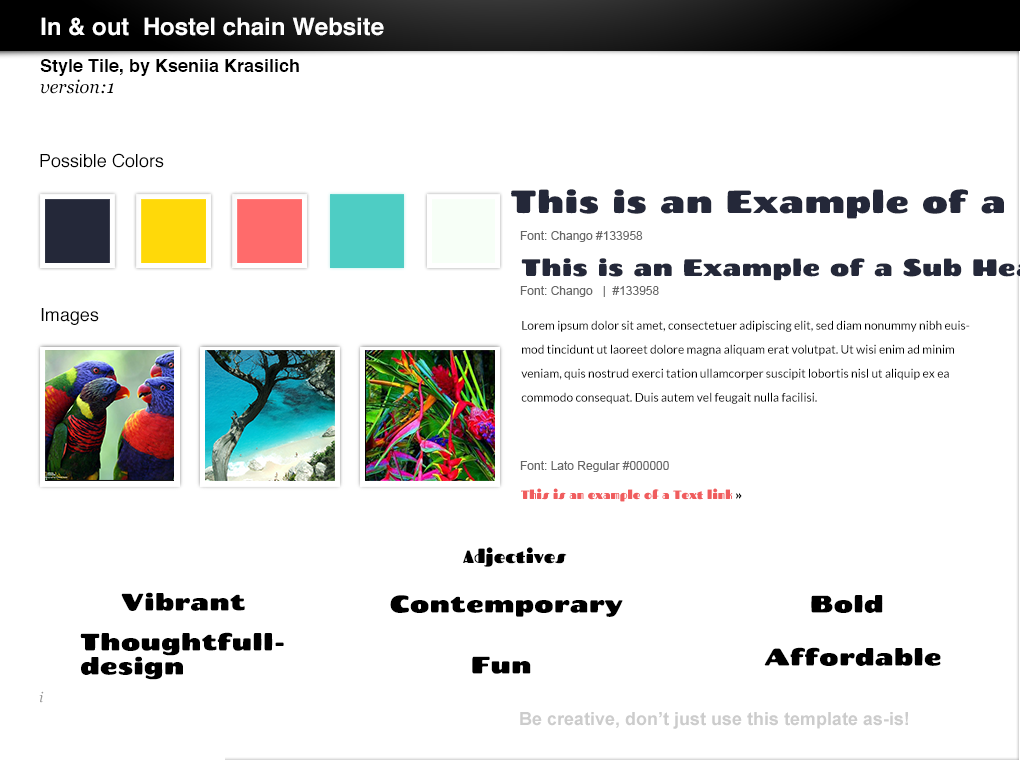
<style>
.page{position:relative;width:1020px;height:760px;background:#ffffff}
.page>*{position:absolute;margin:0}
.t1{font:24px "Helvetica-Bold";color:#ffffff}
.t2{font:18px "Helvetica-Bold";color:#000000}
.t3{font:18px "Georgia-Italic";color:#000000}
.t4{font:18px "Helvetica";color:#000000}
.t5{font:12px "ArialMT";color:#666666}
.t6{font:12px/24px "Lato-Regular";color:#000000}
.t7{font:12px "Fascinate-Regular";color:#f05d5e}
.t8{font:12px "Fascinate-Regular";color:#000000}
.t9{font:18px "Fascinate-Regular";color:#000000}
.t10{font:24px "Chango-Regular";color:#000000}
.t11{font:24px/24px "Chango-Regular";color:#000000}
.t12{font:14px "Georgia-Italic";color:#999999}
.t13{font:18px "Arial-BoldMT";color:#cccccc}
</style>
<div class="page">
<p class="t1" style="left:41px;top:17px;width:343px;height:19px">In &amp; out  Hostel chain Website</p>
<p class="t2" style="left:40px;top:59px;width:259px;height:17px">Style Tile, by Kseniia Krasilich</p>
<p class="t3" style="left:40px;top:79px;width:74px;height:15px">version:1</p>
<p class="t4" style="left:40px;top:153px;width:124px;height:15px">Possible Colors</p>
<p class="t5" style="left:520px;top:231px;width:123px;height:11px">Font: Chango #133958</p>
<p class="t5" style="left:520px;top:286px;width:139px;height:11px">Font: Chango   |  #133958</p>
<p class="t4" style="left:41px;top:308px;width:58px;height:17px">Images</p>
<p class="t6" style="left:521px;top:320px;width:449px;height:84px">Lorem ipsum dolor sit amet, consectetuer adipiscing elit, sed diam nonummy nibh euismod tincidunt ut laoreet dolore magna aliquam erat volutpat. Ut wisi enim ad minim veniam, quis nostrud exerci tation ullamcorper suscipit lobortis nisl ut aliquip ex ea commodo consequat. Duis autem vel feugait nulla facilisi.</p>
<p class="t5" style="left:520px;top:461px;width:149px;height:11px">Font: Lato Regular #000000</p>
<p class="t7" style="left:521px;top:488px;width:221px;height:14px">This is an example of a Text link <span class="t8">»</span></p>
<p class="t9" style="left:463px;top:547px;width:104px;height:20px">Adjectives</p>
<p class="t10" style="left:121px;top:592px;width:124px;height:19px">Vibrant</p>
<p class="t10" style="left:390px;top:595px;width:233px;height:22px">Contemporary</p>
<p class="t10" style="left:811px;top:595px;width:72px;height:18px">Bold</p>
<p class="t11" style="left:80px;top:632px;width:204px;height:48px">Thoughtfull-<br>design</p>
<p class="t10" style="left:764px;top:647px;width:177px;height:19px">Affordable</p>
<p class="t10" style="left:472px;top:656px;width:59px;height:18px">Fun</p>
<p class="t12" style="left:39px;top:691px;width:5px;height:12px">i</p>
<p class="t13" style="left:520px;top:712px;width:388px;height:17px">Be creative, don’t just use this template as-is!</p>
</div>
